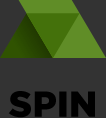
<style>
.page{position:relative;width:106px;height:118px;background:#333333}
.page>*{position:absolute;margin:0}
.t1{font:36px "GothamBlack";letter-spacing:0.01em;color:#000000;text-transform:uppercase}
</style>
<div class="page">
<p class="t1" style="left:8px;top:91px;width:87px;height:27px">spiN</p>
</div>
